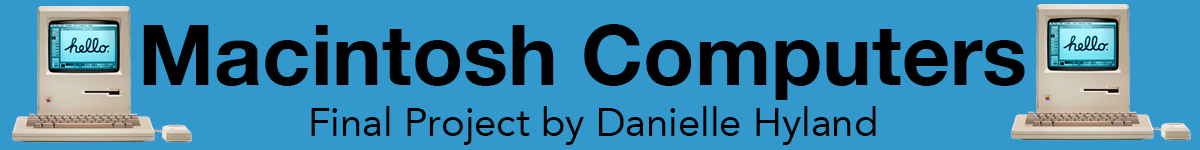
<style>
.page{position:relative;width:1200px;height:150px;background:#3399cc}
.page>*{position:absolute;margin:0}
.t1{font:84px "HelveticaNeue-Bold";color:#000000}
.t2{font:40px "Avenir-Roman";color:#000000}
</style>
<div class="page">
<p class="t1" style="left:143px;top:24px;width:882px;height:76px">Macintosh Computers</p>
<p class="t2" style="left:311px;top:106px;width:565px;height:39px">Final Project by Danielle Hyland</p>
</div>
